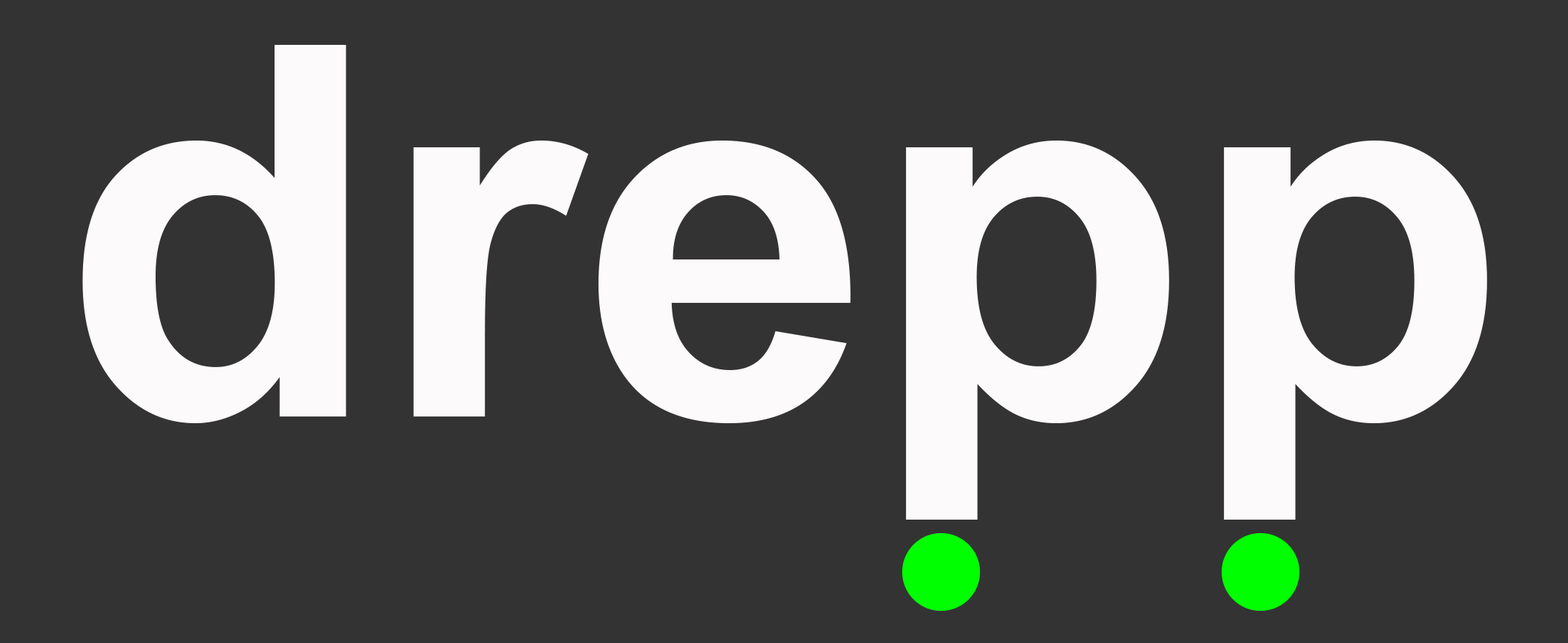
<style>
.page{position:relative;width:1568px;height:643px;background:#333333}
.page>*{position:absolute;margin:0}
.t1{font:519.1px "Arial-BoldMT";color:#fcfafa}
</style>
<div class="page">
<p class="t1" style="left:82px;top:45px;width:1405px;height:475px">drepp</p>
</div>
